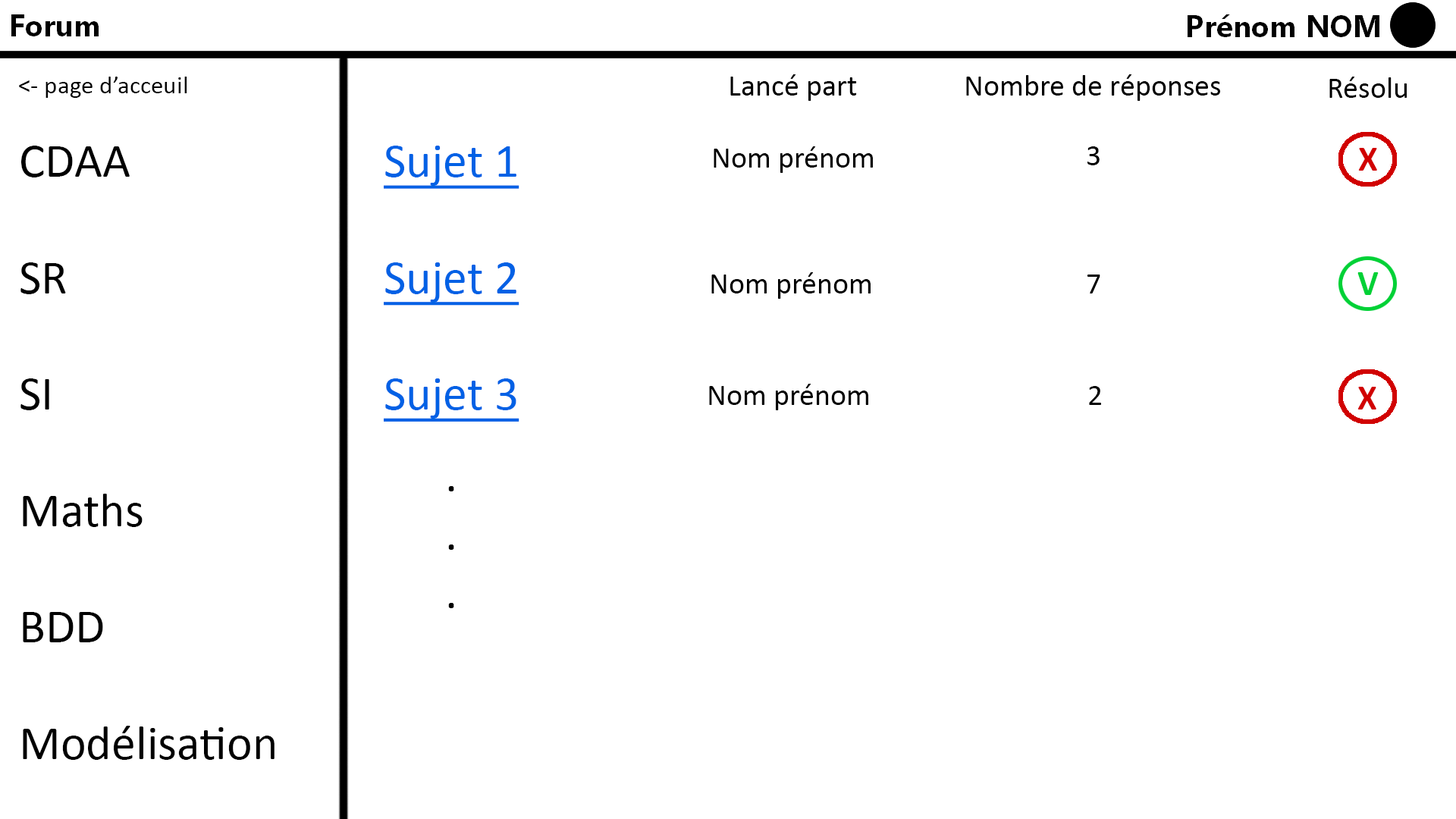
<style>
.page{position:relative;width:1456px;height:819px;background:#ffffff}
.page>*{position:absolute;margin:0}
.t1{font:25.3px "Calibri";color:#000000}
.t2{font:30.3px "Calibri";color:#000000}
.t3{font:48.5px "Calibri";color:#000000}
.t4{font:48.5px "Calibri";color:#0061e5;text-decoration:underline}
.t5{font:35.4px "Calibri-Bold";color:#d10000}
.t6{font:35.4px "Calibri-Bold";color:#00d136}
</style>
<div class="page">
<p class="t1" style="left:19px;top:77px;width:168px;height:21px">&lt;- page d’acceuil</p>
<p class="t2" style="left:730px;top:74px;width:127px;height:27px">Lancé part</p>
<p class="t2" style="left:966px;top:74px;width:254px;height:27px">Nombre de réponses</p>
<p class="t2" style="left:1329px;top:77px;width:78px;height:21px">Résolu</p>
<p class="t3" style="left:20px;top:146px;width:255px;height:614px">CDAA<br><br>SR<br><br>SI<br><br>Maths<br><br>BDD<br><br>Modélisation</p>
<p class="t4" style="left:384px;top:146px;width:135px;height:276px">Sujet 1<br><br>Sujet 2<br><br>Sujet 3</p>
<p class="t2" style="left:714px;top:146px;width:159px;height:27px">Nom prénom</p>
<p class="t2" style="left:1087px;top:146px;width:13px;height:19px">3</p>
<p class="t5" style="left:1358px;top:148px;width:19px;height:23px">X</p>
<p class="t2" style="left:711px;top:272px;width:160px;height:27px">Nom prénom</p>
<p class="t2" style="left:1087px;top:275px;width:13px;height:18px">7</p>
<p class="t6" style="left:1357px;top:272px;width:22px;height:23px">V</p>
<p class="t2" style="left:709px;top:384px;width:159px;height:26px">Nom prénom</p>
<p class="t2" style="left:1089px;top:386px;width:12px;height:19px">2</p>
<p class="t5" style="left:1357px;top:387px;width:19px;height:22px">X</p>
<p class="t3" style="left:448px;top:486px;width:6px;height:122px">.<br>.<br>.</p>
</div>
